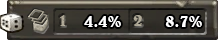
<style>
.page{position:relative;width:218px;height:40px}
.page>*{position:absolute;margin:0}
.t1{font:18px "BelweBT-Bold";color:#ada795}
.t2{font:18px "BelweBT-Bold";color:#ffffff}
.t3{font:18px "BelweBT-Bold";color:#afa897}
</style>
<div class="page">
<p class="t1" style="left:60px;top:15px;width:6px;height:11px">1</p>
<p class="t2" style="left:84px;top:16px;width:37px;height:11px">4.4%</p>
<p class="t3" style="left:133px;top:15px;width:9px;height:11px">2</p>
<p class="t2" style="left:165px;top:16px;width:37px;height:11px">8.7%</p>
</div>
